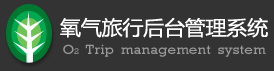
<style>
.page{position:relative;width:274px;height:71px;background:#333333}
.page>*{position:absolute;margin:0}
.t1{font:20px "MicrosoftYaHei";color:#ffffff;scale:1.05 1}
.t2{font:13.5px "Rockwell";color:#9a9a9a;scale:1.09 1}
.t3{font:8.2px "Rockwell";color:#9a9a9a;scale:1.09 1}
</style>
<div class="page">
<p class="t1" style="left:60px;top:17px;width:208px;height:21px">氧气旅行后台管理系统</p>
<p class="t2" style="left:63px;top:44px;width:203px;height:13px">O<span class="t3">2</span>  Trip  management  system</p>
</div>
